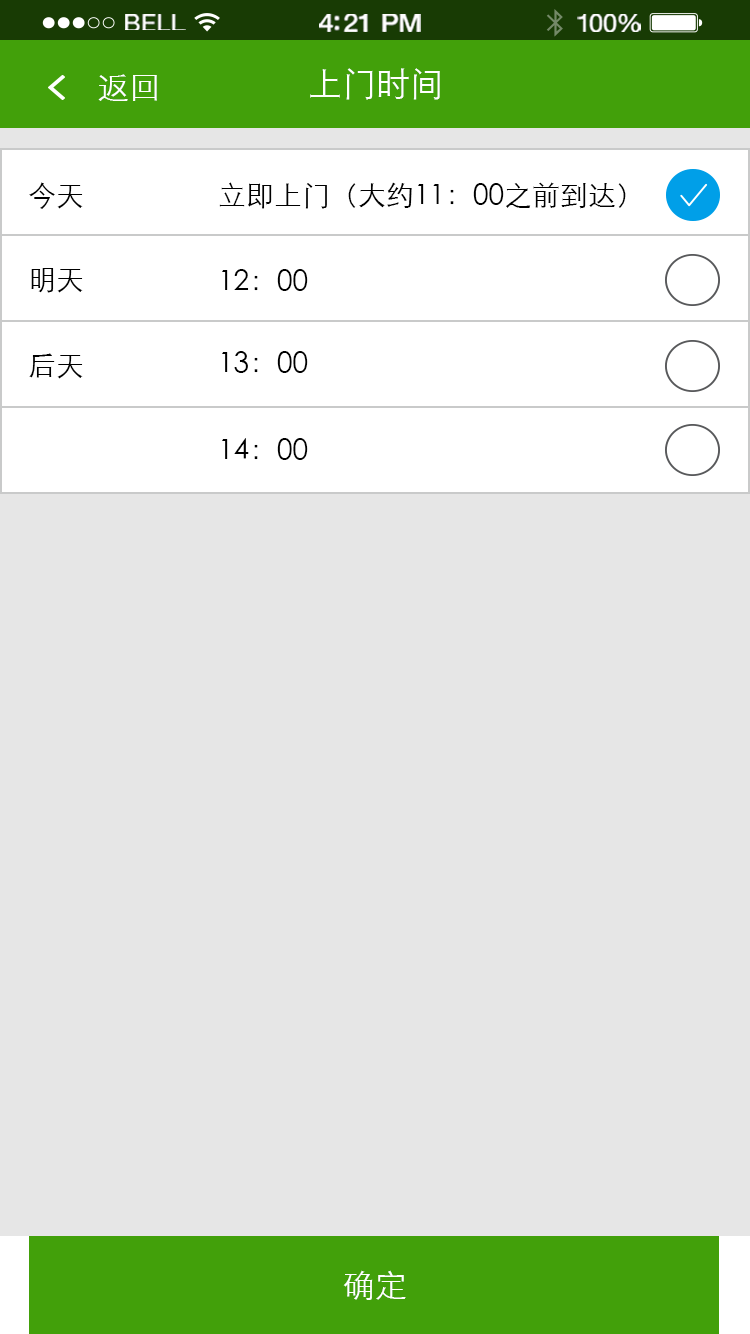
<style>
.page{position:relative;width:750px;height:1334px;background:#e6e6e6}
.page>*{position:absolute;margin:0}
.t1{font:23.3px "HelveticaNeue";letter-spacing:0.02em;color:#ffffff;scale:1.06 1}
.t2{font:25.3px "HelveticaNeue-Medium";letter-spacing:-0.02em;color:#ffffff;scale:1.06 1}
.t3{font:24.3px "HelveticaNeue";letter-spacing:-0.02em;color:#ffffff;scale:1.06 1}
.t4{font:32px "STXihei";color:#ffffff}
.t5{font:34px "STXihei";color:#ffffff}
.t6{font:28px "STXihei";color:#000000}
</style>
<div class="page">
<p class="t1" style="left:125px;top:14px;width:61px;height:16px">BELL</p>
<p class="t2" style="left:319px;top:14px;width:102px;height:18px">4:21 PM</p>
<p class="t3" style="left:577px;top:14px;width:64px;height:18px">100%</p>
<p class="t4" style="left:98px;top:74px;width:59px;height:27px">返回</p>
<p class="t5" style="left:310px;top:68px;width:130px;height:32px">上门时间</p>
<p class="t6" style="left:29px;top:182px;width:54px;height:27px">今天</p>
<p class="t6" style="left:219px;top:182px;width:407px;height:27px">立即上门（大约11：00之前到达）</p>
<p class="t6" style="left:31px;top:268px;width:52px;height:25px">明天</p>
<p class="t6" style="left:222px;top:269px;width:86px;height:22px">12：00</p>
<p class="t6" style="left:29px;top:353px;width:54px;height:26px">后天</p>
<p class="t6" style="left:222px;top:351px;width:86px;height:22px">13：00</p>
<p class="t6" style="left:222px;top:438px;width:86px;height:22px">14：00</p>
<p class="t4" style="left:343px;top:1270px;width:63px;height:30px">确定</p>
</div>
